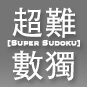
<style>
.page{position:relative;width:87px;height:87px}
.page>*{position:absolute;margin:0}
.t1{font:33px/42.9px "AdobeHeitiStd-Regular";color:#ffffff}
.t2{font:9px "Copperplate";color:#ffffff;font-weight:bold}
</style>
<div class="page">
<p class="t1" style="left:12px;top:7px;width:64px;height:74px;text-align:center">超難<br>數獨</p>
<p class="t2" style="left:7px;top:40px;width:73px;height:7px">[Super Sudoku]</p>
</div>
